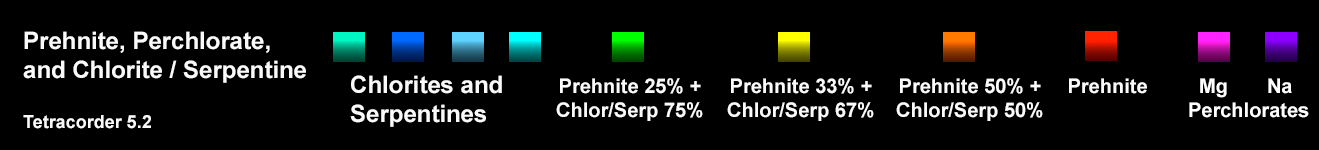
<style>
.page{position:relative;width:1319px;height:150px;background:#000000}
.page>*{position:absolute;margin:0}
.t1{font:24px "Arial-BoldMT";color:#f9faf9}
.t2{font:18px "Arial-BoldMT";color:#f9faf9}
.t3{font:20px "Arial-BoldMT";color:#f9faf9}
.t4{font:20px "Arial-BoldMT";color:#ffffff}
</style>
<div class="page">
<p class="t1" style="left:23px;top:31px;width:283px;height:98px">Prehnite, Perchlorate,<br>and Chlorite / Serpentine<br><br><span class="t2">Tetracorder 5.2</span></p>
<p class="t1" style="left:350px;top:75px;width:152px;height:52px">Chlorites and<br>Serpentines</p>
<p class="t3" style="left:556px;top:78px;width:147px;height:43px;text-align:center">Prehnite 25% +<br>Chlor/Serp 75%</p>
<p class="t3" style="left:727px;top:78px;width:147px;height:43px;text-align:center">Prehnite 33% +<br>Chlor/Serp 67%</p>
<p class="t3" style="left:896px;top:78px;width:147px;height:43px;text-align:center">Prehnite 50% +<br>Chlor/Serp 50%</p>
<p class="t3" style="left:1069px;top:78px;width:78px;height:16px">Prehnite</p>
<p class="t4" style="left:1189px;top:78px;width:120px;height:40px">Mg       Na<br>Perchlorates</p>
</div>
